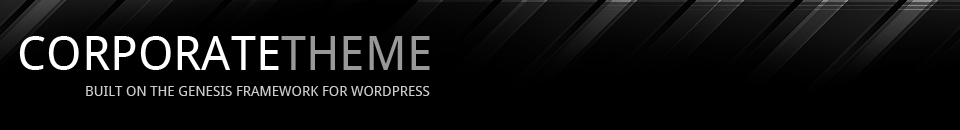
<style>
.page{position:relative;width:960px;height:130px;background:#000000}
.page>*{position:absolute;margin:0}
.t1{font:48px "DroidSans";color:#ffffff;text-transform:uppercase}
.t2{font:48px "DroidSans";color:#999999;text-transform:uppercase}
.t3{font:14px "DroidSans";color:#cccccc;text-transform:uppercase}
</style>
<div class="page">
<p class="t1" style="left:19px;top:36px;width:411px;height:34px">Corporate<span class="t2">Theme</span></p>
<p class="t3" style="left:86px;top:86px;width:344px;height:10px">Built on the Genesis Framework for WordPress</p>
</div>
